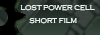
<style>
.page{position:relative;width:100px;height:35px}
.page>*{position:absolute;margin:0}
.t1{font:7px "CopperplateGothic-Light";color:#ffffff}
</style>
<div class="page">
<p class="t1" style="left:20px;top:4px;width:75px;height:7px">LOST POWER CELL</p>
<p class="t1" style="left:29px;top:18px;width:48px;height:6px">SHORT FILM</p>
</div>
